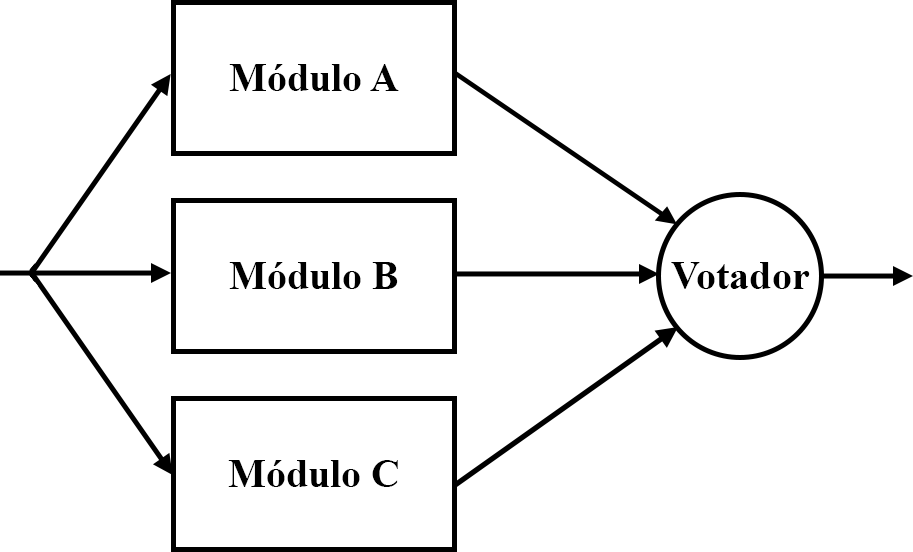
<style>
.page{position:relative;width:913px;height:552px;background:#ffffff}
.page>*{position:absolute;margin:0}
.t1{font:40px "TimesNewRomanPS-BoldMT";color:#000000}
</style>
<div class="page">
<p class="t1" style="left:229px;top:64px;width:170px;height:27px">Módulo A</p>
<p class="t1" style="left:229px;top:262px;width:169px;height:27px">Módulo B</p>
<p class="t1" style="left:671px;top:262px;width:139px;height:27px">Votador</p>
<p class="t1" style="left:228px;top:460px;width:170px;height:27px">Módulo C</p>
</div>
